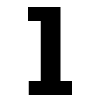
<style>
.page{position:relative;width:100px;height:100px;background:#ffffff}
.page>*{position:absolute;margin:0}
.t1{font:129.9px "Rockwell-Bold";color:#000000}
</style>
<div class="page">
<p class="t1" style="left:28px;top:7px;width:44px;height:88px">1</p>
</div>
